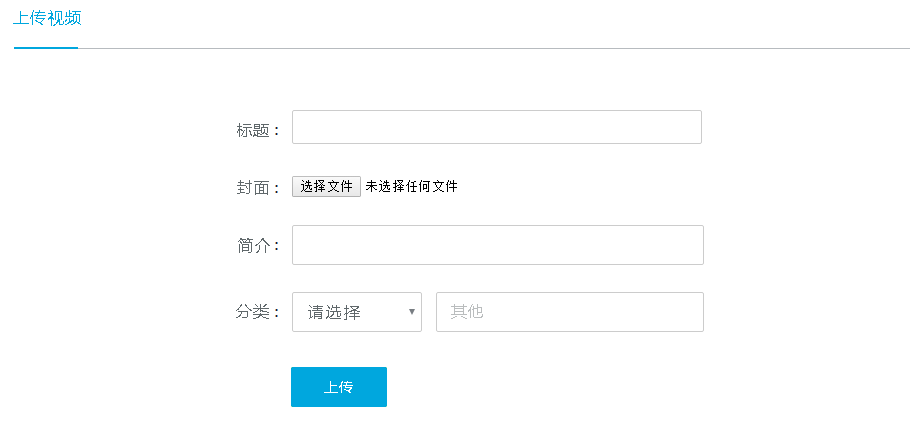
<style>
.page{position:relative;width:923px;height:439px;background:#ffffff}
.page>*{position:absolute;margin:0}
.t1{font:16px "MicrosoftYaHei";letter-spacing:0.1em;color:#00a7de;text-transform:uppercase}
.t2{font:16px "MicrosoftYaHei";letter-spacing:0.1em;color:#60686b;text-transform:uppercase}
.t3{font:16px "MicrosoftYaHei";letter-spacing:0.1em;color:#babdbe;text-transform:uppercase}
.t4{font:14px "MicrosoftYaHei";letter-spacing:0.1em;color:#ffffff;text-transform:uppercase}
</style>
<div class="page">
<p class="t1" style="left:13px;top:10px;width:68px;height:16px">上传视频</p>
<p class="t2" style="left:237px;top:123px;width:32px;height:14px">标题</p>
<p class="t2" style="left:237px;top:180px;width:32px;height:15px">封面</p>
<p class="t2" style="left:238px;top:238px;width:32px;height:15px">简介</p>
<p class="t2" style="left:236px;top:304px;width:33px;height:15px">分类</p>
<p class="t2" style="left:308px;top:305px;width:52px;height:15px">请选择</p>
<p class="t3" style="left:451px;top:304px;width:32px;height:15px">其他</p>
<p class="t4" style="left:324px;top:381px;width:29px;height:12px">上传</p>
</div>
